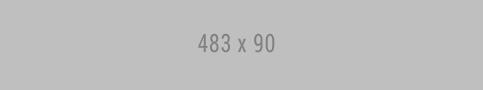
<style>
.page{position:relative;width:483px;height:90px;background:#bfbfbf}
.page>*{position:absolute;margin:0}
.t1{font:25px "Roboto-Condensed";letter-spacing:0.07em;color:#818181;scale:0.8 1}
</style>
<div class="page">
<p class="t1" style="left:198px;top:33px;width:77px;height:20px">483 x 90</p>
</div>
